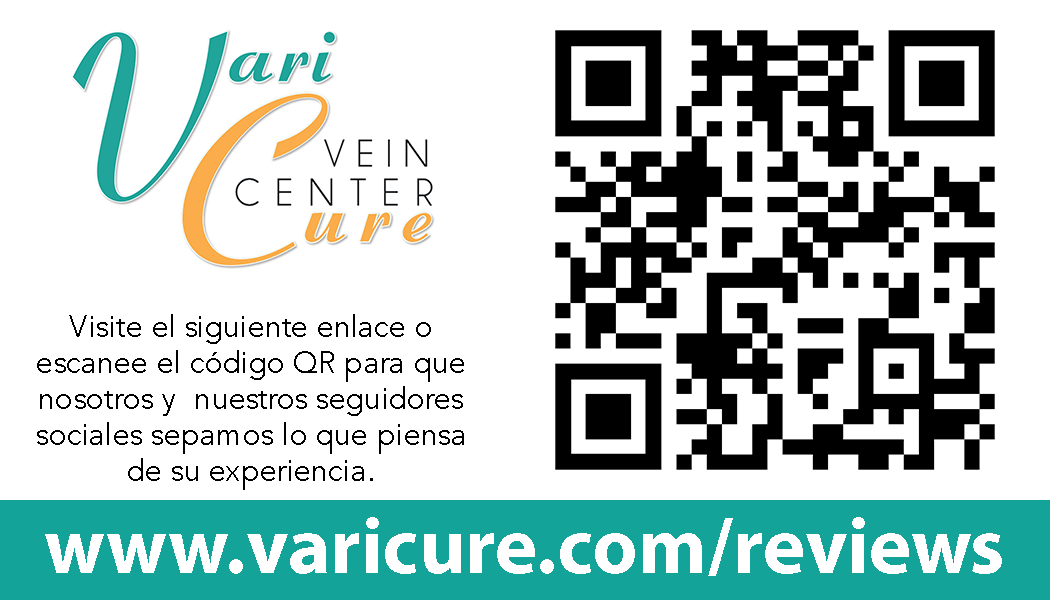
<style>
.page{position:relative;width:1050px;height:600px;background:#ffffff}
.page>*{position:absolute;margin:0}
.t1{font:30px "Avenir-Book";color:#000000}
.t2{font:80px "MyriadPro-Bold";color:#ffffff}
</style>
<div class="page">
<p class="t1" style="left:37px;top:314px;width:427px;height:176px;text-align:center">Visite el siguiente enlace o <br>escanee el código QR para que nosotros y  nuestros seguidores sociales sepamos lo que piensa <br>de su experiencia.</p>
<p class="t2" style="left:45px;top:517px;width:957px;height:59px">www.varicure.com/reviews</p>
</div>
